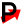
<style>
.page{position:relative;width:24px;height:24px;background:#ffffff}
.page>*{position:absolute;margin:0}
.t1{font:28.5px "Code-Bold";color:#000000}
</style>
<div class="page">
<p class="t1" style="left:2px;top:2px;width:15px;height:20px">P</p>
</div>
